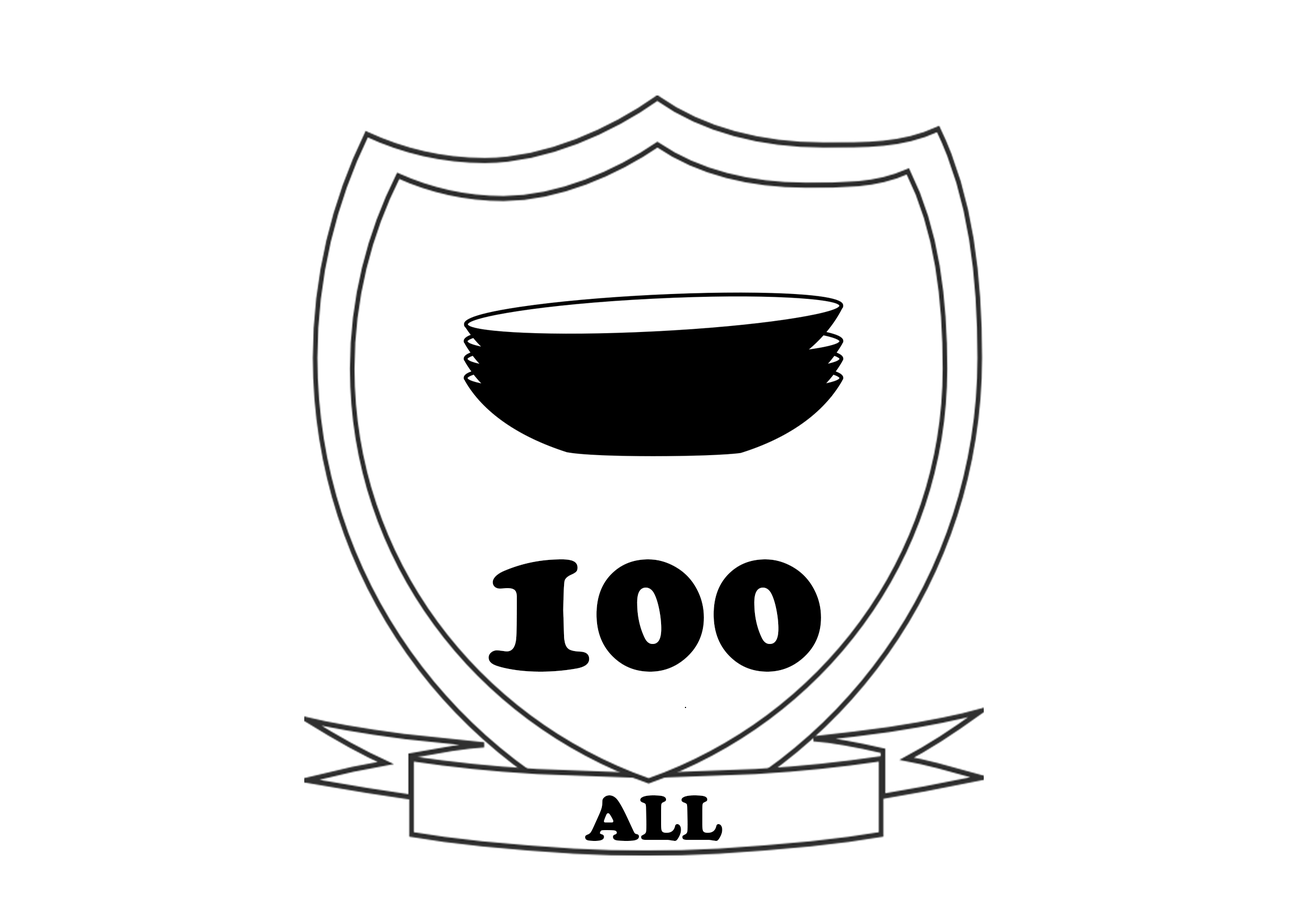
<style>
.page{position:relative;width:1307px;height:912px;background:#ffffff}
.page>*{position:absolute;margin:0}
.t1{font:195.3px "CooperBlack";color:#000000}
.t2{font:65.1px "CooperBlack";color:#000000}
</style>
<div class="page">
<p class="t1" style="left:489px;top:559px;width:332px;height:113px">100</p>
<p class="t2" style="left:585px;top:795px;width:138px;height:46px">ALL</p>
</div>
